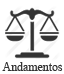
<style>
.page{position:relative;width:64px;height:74px;background:#ffffff}
.page>*{position:absolute;margin:0}
.t1{font:12px "TimesNewRomanPSMT";color:#333333}
</style>
<div class="page">
<p class="t1" style="left:2px;top:62px;width:61px;height:9px">Andamentos</p>
</div>
